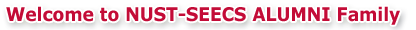
<style>
.page{position:relative;width:416px;height:30px;background:#ffffff}
.page>*{position:absolute;margin:0}
.t1{font:18.7px "Verdana-Bold";color:#c30c37;scale:0.92 1}
</style>
<div class="page">
<p class="t1" style="left:6px;top:6px;width:394px;height:19px">Welcome to NUST-SEECS ALUMNI Family</p>
</div>
